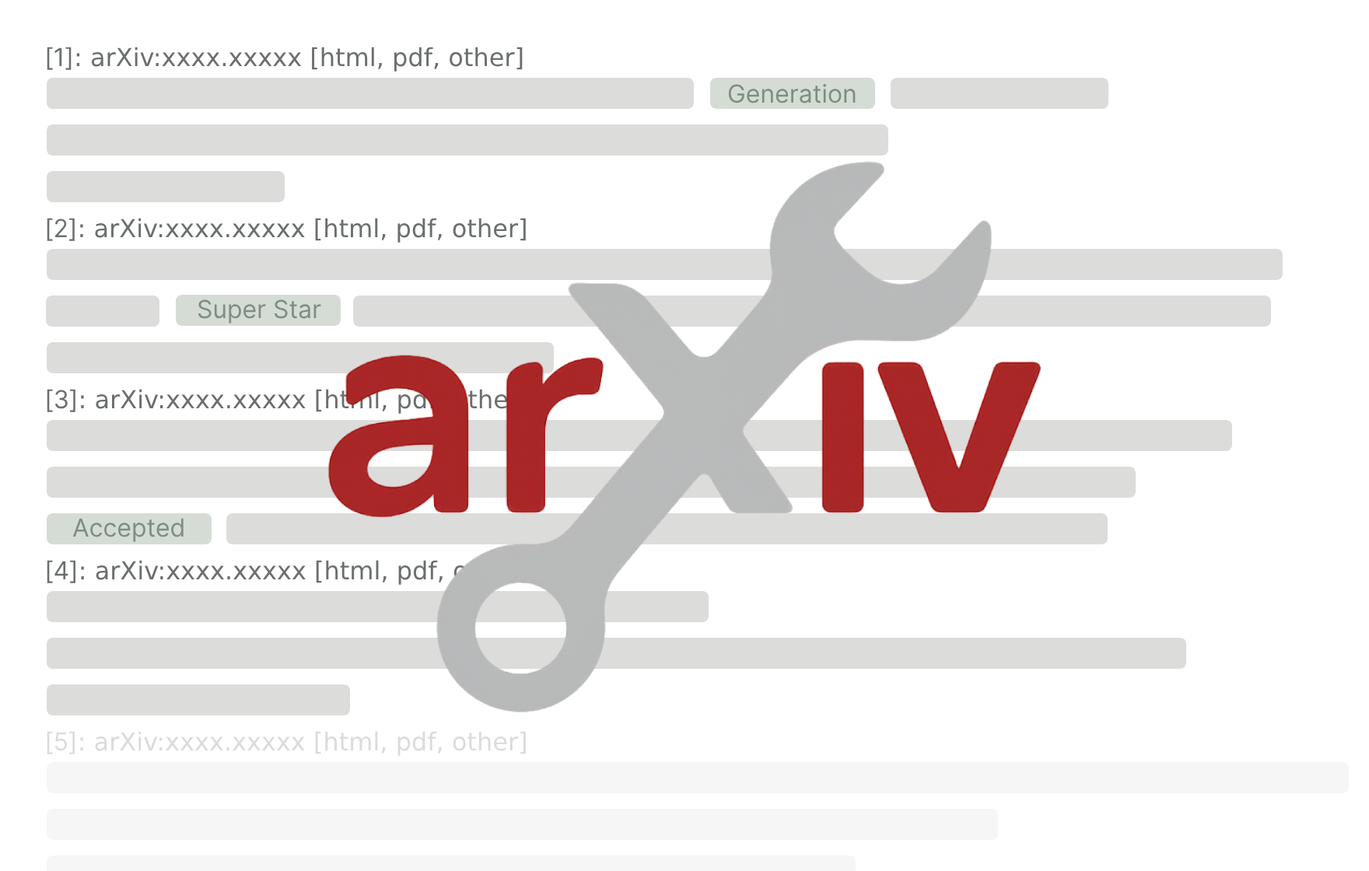
<style>
.page{position:relative;width:1369px;height:871px;background:#ffffff}
.page>*{position:absolute;margin:0}
.t1{font:24.9px "DejaVuSans";color:#6a6f6d}
.t2{font:24.9px "Inter-Regular";color:#6a6f6d}
.t3{font:24.9px "Inter-Regular";color:#7c8e82}
.t4{font:24.9px "DejaVuSans";color:#dadbda}
.t5{font:24.9px "Inter-Regular";color:#dadbda}
</style>
<div class="page">
<p class="t1" style="left:47px;top:47px;width:476px;height:25px"><span class="t2">[1]</span>: arXiv:xxxx.xxxxx [html, pdf, other]</p>
<p class="t3" style="left:728px;top:83px;width:128px;height:20px">Generation</p>
<p class="t1" style="left:47px;top:218px;width:479px;height:25px"><span class="t2">[2]</span>: arXiv:xxxx.xxxxx [html, pdf, other]</p>
<p class="t3" style="left:198px;top:299px;width:123px;height:25px">Super Star</p>
<p class="t1" style="left:47px;top:389px;width:480px;height:25px"><span class="t2">[3]</span>: arXiv:xxxx.xxxxx [html, pdf, other]</p>
<p class="t3" style="left:72px;top:518px;width:112px;height:24px">Accepted</p>
<p class="t1" style="left:47px;top:560px;width:480px;height:25px"><span class="t2">[4]</span>: arXiv:xxxx.xxxxx [html, pdf, other]</p>
<p class="t4" style="left:47px;top:731px;width:479px;height:25px"><span class="t5">[5]</span>: arXiv:xxxx.xxxxx [html, pdf, other]</p>
</div>
